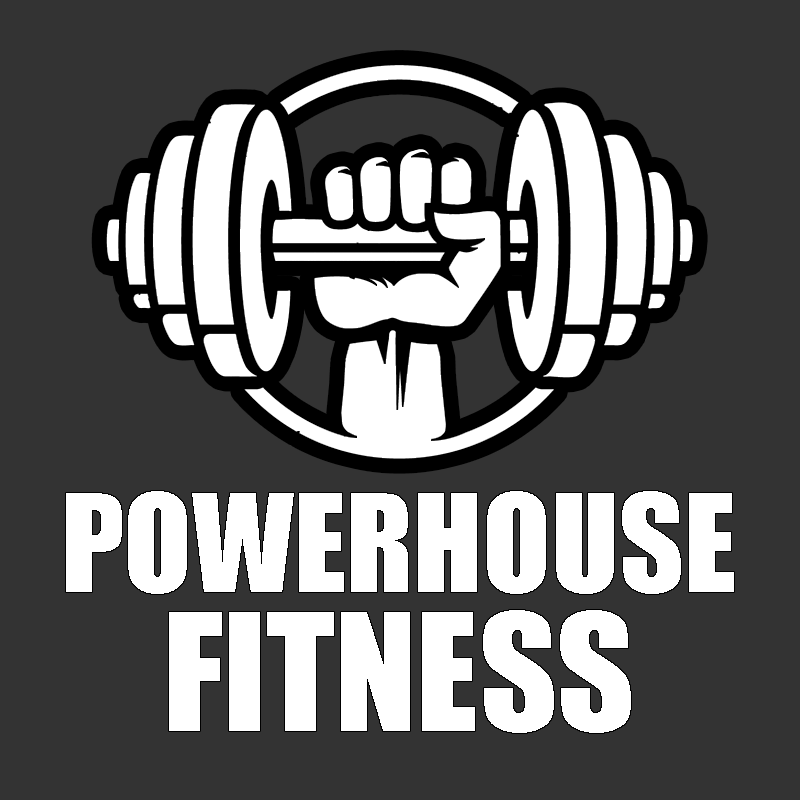
<style>
.page{position:relative;width:800px;height:800px;background:#333333}
.page>*{position:absolute;margin:0}
.t1{font:125px "Impact";color:#ffffff}
.t2{font:150px "Impact";color:#ffffff}
</style>
<div class="page">
<p class="t1" style="left:66px;top:491px;width:668px;height:103px">POWERHOUSE</p>
<p class="t2" style="left:169px;top:610px;width:462px;height:123px">FITNESS</p>
</div>
